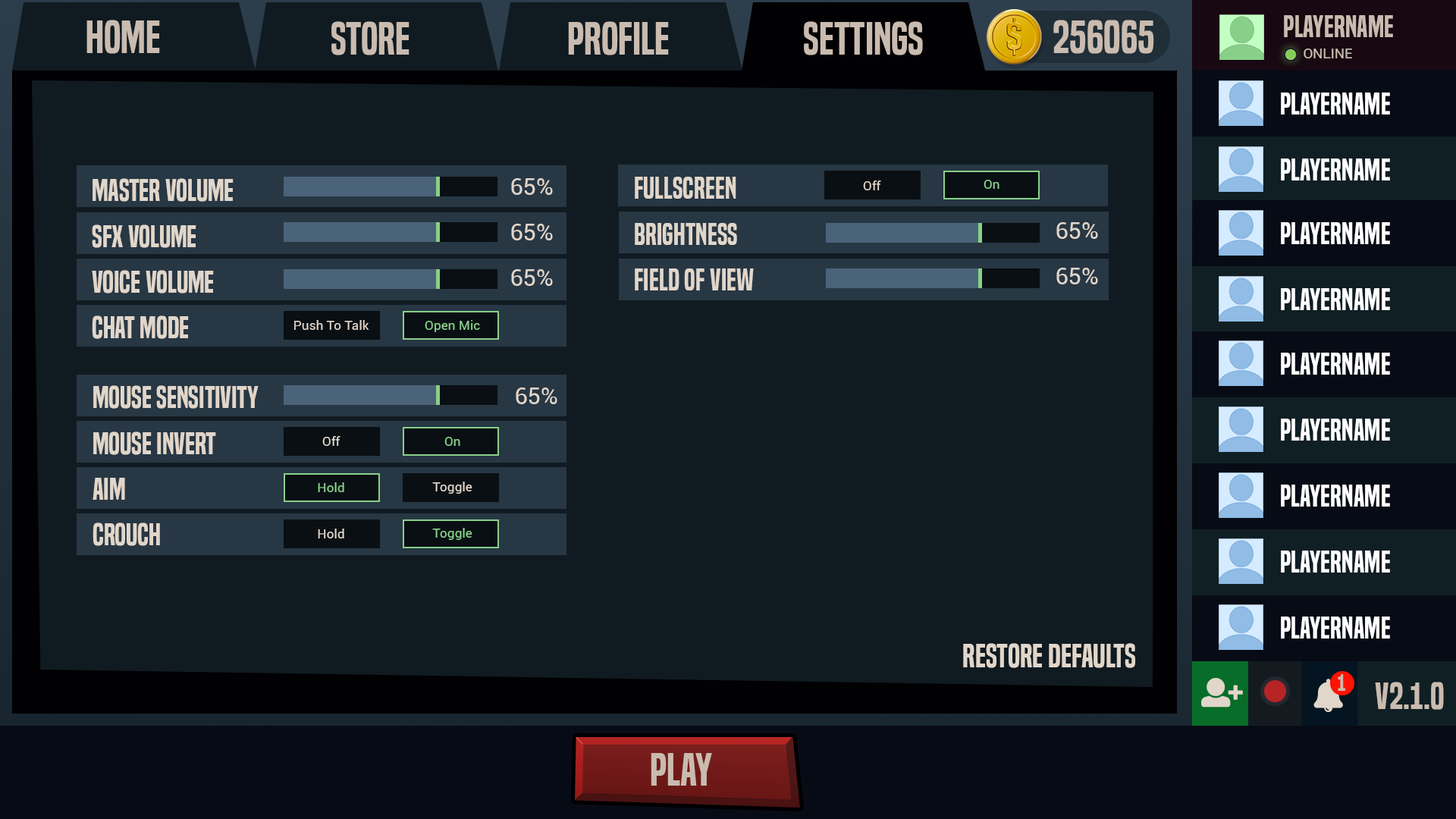
<style>
.page{position:relative;width:1456px;height:819px;background:#101b21}
.page>*{position:absolute;margin:0}
.t1{font:28.4px "BuiltTitlingSb-Regular";color:#c9bbaf}
.t2{font:43.2px "BuiltTitlingSb-Regular";color:#c9bbaf}
.t3{font:14.1px "Roboto-Regular";color:#c9bbaf}
.t4{font:28.4px "BuiltTitlingSb-Regular";color:#ffffff}
.t5{font:28.4px/45.8px "BuiltTitlingSb-Regular";color:#e1d6ca}
.t6{font:23.2px/45.8px "Roboto-Regular";color:#e1d6ca}
.t7{font:13.1px "Roboto-Regular";color:#e1d6ca}
.t8{font:13.1px "Roboto-Regular";color:#88d089}
.t9{font:23.2px "Roboto-Regular";color:#e1d6ca}
.t10{font:31.2px "BuiltTitlingSb-Regular";color:#e1d6ca}
.t11{font:21.8px "BuiltTitlingSb-Regular";color:#c9bbaf}
.t12{font:35.8px "BuiltTitlingSb-Regular";color:#c9bbaf}
</style>
<div class="page">
<p class="t1" style="left:1284px;top:15px;width:109px;height:22px">PLayerName</p>
<p class="t2" style="left:86px;top:20px;width:74px;height:34px">HOME</p>
<p class="t2" style="left:331px;top:21px;width:78px;height:34px">Store</p>
<p class="t2" style="left:568px;top:21px;width:101px;height:34px">PROFILE</p>
<p class="t2" style="left:804px;top:21px;width:119px;height:34px">Settings</p>
<p class="t2" style="left:1053px;top:20px;width:101px;height:34px">256065</p>
<p class="t3" style="left:1304px;top:49px;width:48px;height:9px">ONLINE</p>
<p class="t4" style="left:1281px;top:93px;width:109px;height:22px">PLayerName</p>
<p class="t4" style="left:1281px;top:158px;width:109px;height:22px">PLayerName</p>
<p class="t5" style="left:92px;top:178px;width:142px;height:161px">MAster Volume<br>SFX Volume<br>Voice Volume<br>CHat Mode</p>
<p class="t6" style="left:511px;top:178px;width:42px;height:108px">65%<br>65%<br>65%</p>
<p class="t5" style="left:635px;top:177px;width:119px;height:113px">FullScreen<br>Brightness<br>Field of view</p>
<p class="t7" style="left:863px;top:180px;width:18px;height:10px">Off</p>
<p class="t8" style="left:984px;top:180px;width:15px;height:9px">On</p>
<p class="t6" style="left:1056px;top:222px;width:42px;height:62px">65%<br>65%</p>
<p class="t4" style="left:1281px;top:222px;width:109px;height:22px">PLayerName</p>
<p class="t4" style="left:1281px;top:288px;width:109px;height:22px">PLayerName</p>
<p class="t7" style="left:294px;top:320px;width:75px;height:10px">Push To Talk</p>
<p class="t8" style="left:425px;top:320px;width:55px;height:12px">Open Mic</p>
<p class="t4" style="left:1281px;top:353px;width:109px;height:22px">PLayerName</p>
<p class="t5" style="left:93px;top:385px;width:166px;height:161px">Mouse Sensitivity<br>Mouse Invert<br>Aim<br>Crouch</p>
<p class="t9" style="left:516px;top:388px;width:41px;height:16px">65%</p>
<p class="t4" style="left:1281px;top:419px;width:109px;height:22px">PLayerName</p>
<p class="t7" style="left:322px;top:436px;width:18px;height:10px">Off</p>
<p class="t8" style="left:444px;top:437px;width:16px;height:9px">On</p>
<p class="t8" style="left:318px;top:482px;width:26px;height:10px">Hold</p>
<p class="t7" style="left:432px;top:482px;width:40px;height:12px">Toggle</p>
<p class="t4" style="left:1281px;top:485px;width:109px;height:22px">PLayerName</p>
<p class="t7" style="left:318px;top:529px;width:26px;height:9px">Hold</p>
<p class="t8" style="left:432px;top:528px;width:40px;height:12px">Toggle</p>
<p class="t4" style="left:1281px;top:551px;width:109px;height:22px">PLayerName</p>
<p class="t4" style="left:1281px;top:617px;width:109px;height:22px">PLayerName</p>
<p class="t10" style="left:963px;top:643px;width:173px;height:25px">Restore Defaults</p>
<p class="t11" style="left:1338px;top:674px;width:7px;height:17px">1</p>
<p class="t12" style="left:1375px;top:682px;width:69px;height:28px">v2.1.0</p>
<p class="t2" style="left:651px;top:753px;width:61px;height:33px">PLAY</p>
</div>
